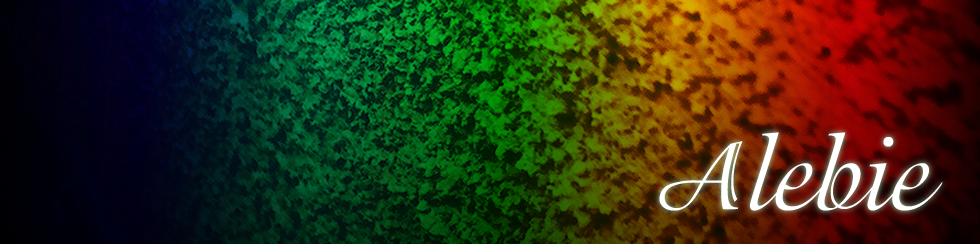
<style>
.page{position:relative;width:980px;height:244px}
.page>*{position:absolute;margin:0}
.t1{font:105px "Adorable-";color:#ffffff}
</style>
<div class="page">
<p class="t1" style="left:659px;top:132px;width:284px;height:79px">Alebie</p>
</div>
